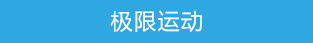
<style>
.page{position:relative;width:313px;height:43px;background:#2fa8e1}
.page>*{position:absolute;margin:0}
.t1{font:22.3px "MicrosoftYaHei";letter-spacing:0.05em;color:#ffffff}
</style>
<div class="page">
<p class="t1" style="left:110px;top:10px;width:92px;height:22px">极限运动</p>
</div>
